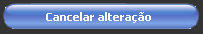
<style>
.page{position:relative;width:203px;height:34px;background:#333333}
.page>*{position:absolute;margin:0}
.t1{font:11px "Tahoma-Bold";color:#ffffff}
</style>
<div class="page">
<p class="t1" style="left:46px;top:12px;width:105px;height:11px">Cancelar alteração</p>
</div>
